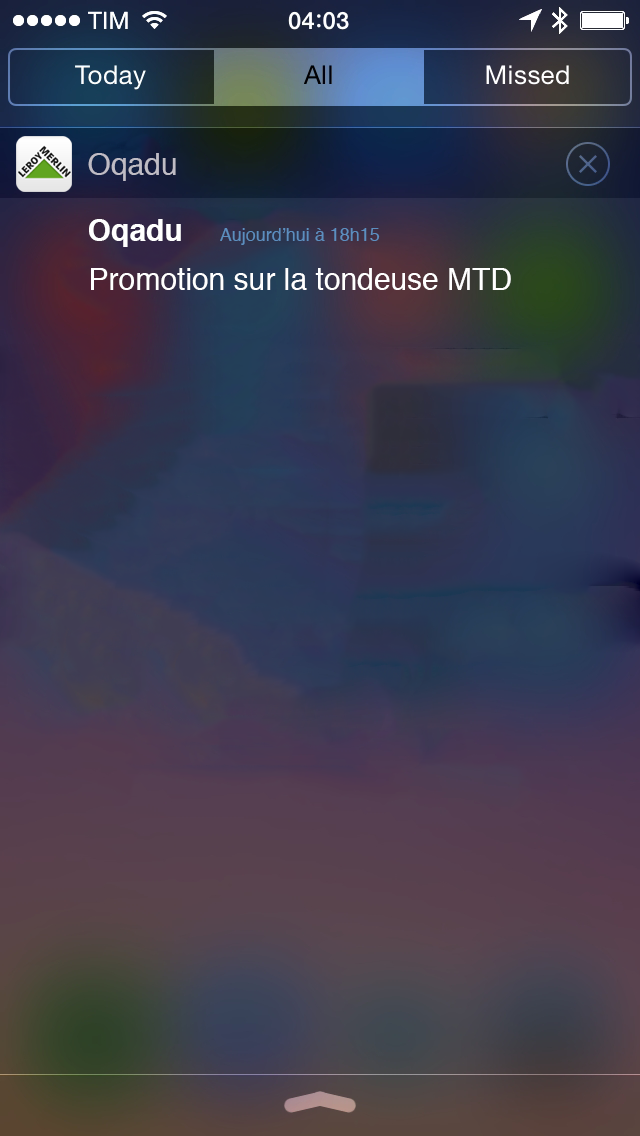
<style>
.page{position:relative;width:640px;height:1136px}
.page>*{position:absolute;margin:0}
.t1{font:30px "Helvetica";color:#bfbcc5}
.t2{font:30px "Helvetica-Bold";color:#ffffff}
.t3{font:18px "Helvetica";color:#5c8ebf}
.t4{font:30px "Helvetica";color:#ffffff}
</style>
<div class="page">
<p class="t1" style="left:88px;top:153px;width:88px;height:28px">Oqadu</p>
<p class="t2" style="left:89px;top:219px;width:92px;height:28px">Oqadu</p>
<p class="t3" style="left:220px;top:228px;width:160px;height:17px">Aujourd’hui à 18h15</p>
<p class="t4" style="left:91px;top:268px;width:420px;height:22px">Promotion sur la tondeuse MTD</p>
</div>
